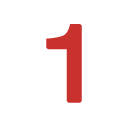
<style>
.page{position:relative;width:128px;height:128px;background:#ffffff}
.page>*{position:absolute;margin:0}
.t1{font:108px "Helvetica";color:#c8312d;font-weight:bold;scale:1.15 1}
</style>
<div class="page">
<p class="t1" style="left:46px;top:24px;width:36px;height:79px">1</p>
</div>
